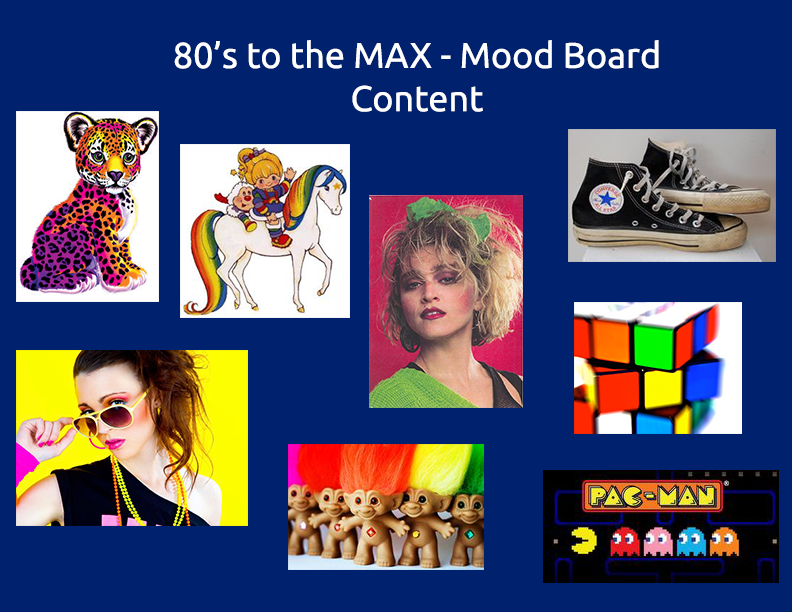
<style>
.page{position:relative;width:792px;height:612px;background:#00226e}
.page>*{position:absolute;margin:0}
.t1{font:36px "Ubuntu";color:#ffffff}
</style>
<div class="page">
<p class="t1" style="left:174px;top:40px;width:485px;height:72px;text-align:center">80’s to the MAX - Mood Board<br>Content</p>
</div>
